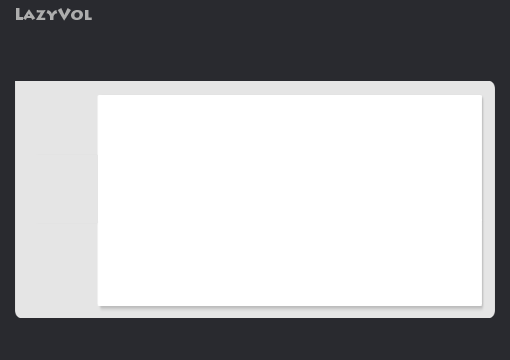
<style>
.page{position:relative;width:510px;height:360px;background:#ffffff}
.page>*{position:absolute;margin:0}
.t1{font:16px "LithosPro-Black";color:#adadad}
</style>
<div class="page">
<p class="t1" style="left:16px;top:8px;width:76px;height:13px">LazyVol</p>
</div>
